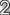
<style>
.page{position:relative;width:10px;height:15px}
.page>*{position:absolute;margin:0}
.t1{font:19px "Opificio";color:#eeeeee}
</style>
<div class="page">
<p class="t1" style="left:0px;top:0px;width:10px;height:15px">2</p>
</div>
